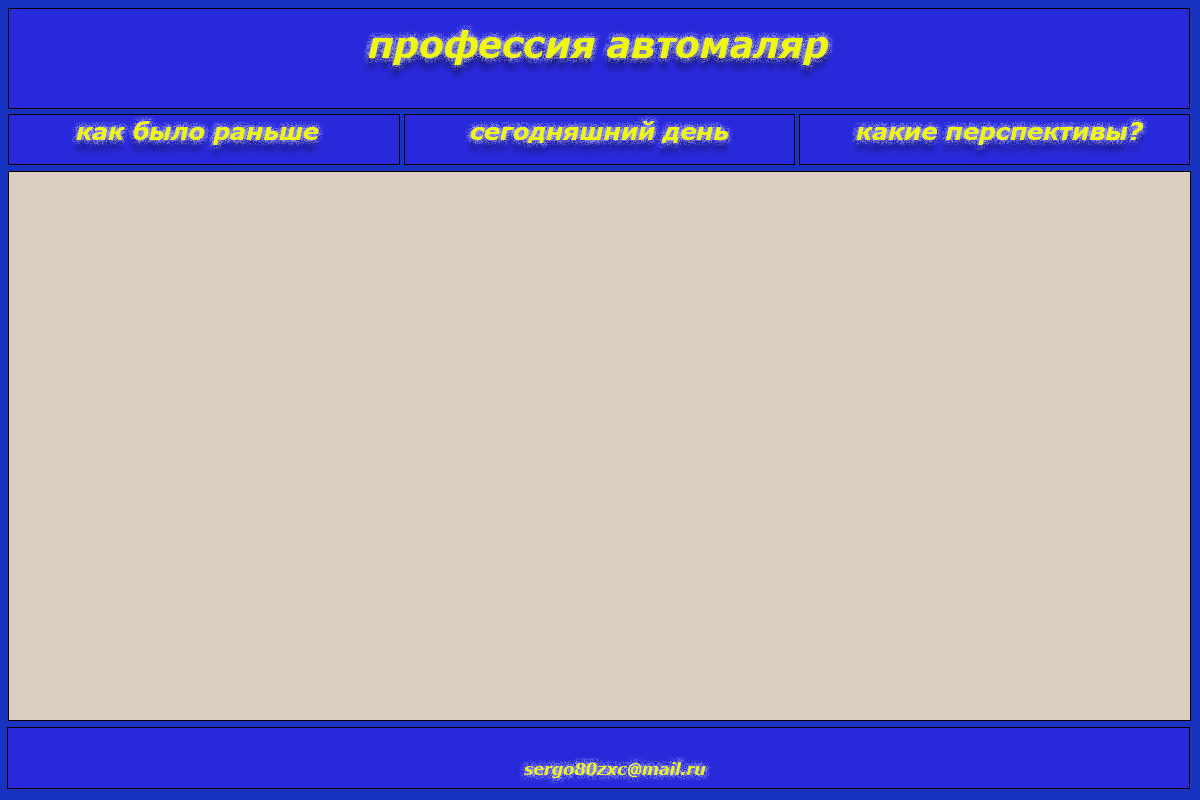
<style>
.page{position:relative;width:1200px;height:800px;background:#dccdc1}
.page>*{position:absolute;margin:0}
.t1{font:36px "Verdana-BoldItalic";color:#eff70a}
.t2{font:24px "Verdana-BoldItalic";color:#eff70a}
.t3{font:16px "Verdana-BoldItalic";color:#eff70a}
</style>
<div class="page">
<p class="t1" style="left:368px;top:30px;width:460px;height:35px">профессия автомаляр</p>
<p class="t2" style="left:76px;top:121px;width:243px;height:24px">как было раньше</p>
<p class="t2" style="left:470px;top:121px;width:258px;height:22px">сегодняшний день</p>
<p class="t2" style="left:856px;top:122px;width:288px;height:23px">какие перспективы?</p>
<p class="t3" style="left:524px;top:762px;width:182px;height:16px">sergo80zxc@mail.ru</p>
</div>
